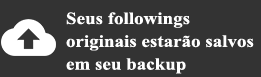
<style>
.page{position:relative;width:261px;height:77px;background:#333333}
.page>*{position:absolute;margin:0}
.t1{font:17.1px "TimesNewRomanPS-BoldMT";color:#ffffff;scale:1.11 1}
</style>
<div class="page">
<p class="t1" style="left:66px;top:12px;width:188px;height:62px">Seus followings<br>originais estarão salvos<br>em seu backup</p>
</div>
